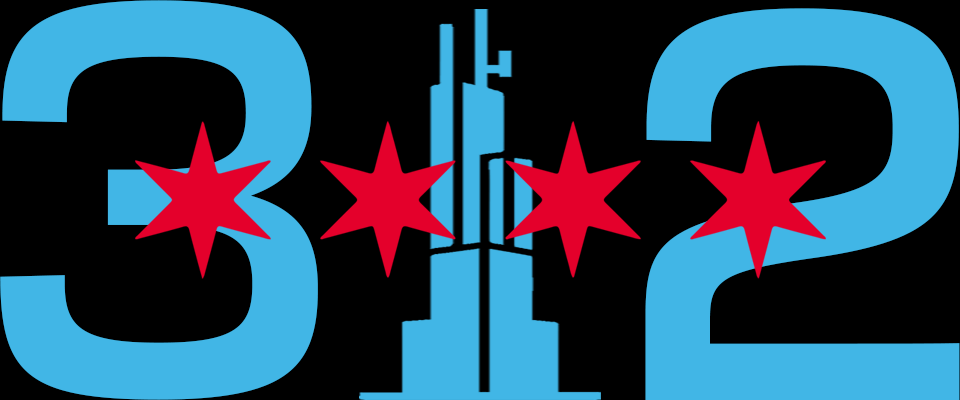
<style>
.page{position:relative;width:960px;height:400px;background:#000000}
.page>*{position:absolute;margin:0}
.t1{font:540.8px "Transducer-Medium";letter-spacing:-0.005em;color:#41b6e6}
</style>
<div class="page">
<p class="t1" style="left:0px;top:0px;width:318px;height:400px">3</p>
<p class="t1" style="left:645px;top:8px;width:315px;height:392px">2</p>
</div>
